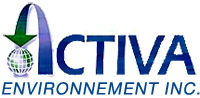
<style>
.page{position:relative;width:200px;height:98px;background:#ffffff}
.page>*{position:absolute;margin:0}
.t1{font:16.8px "HelveticaNeue";letter-spacing:0.07em;color:#024790;font-style:italic}
</style>
<div class="page">
<p class="t1" style="left:2px;top:82px;width:198px;height:13px">ENVIRONNEMENT INC.</p>
</div>
